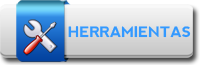
<style>
.page{position:relative;width:200px;height:65px}
.page>*{position:absolute;margin:0}
.t1{font:14.5px "nevis-Bold";color:#3399ff}
</style>
<div class="page">
<p class="t1" style="left:68px;top:26px;width:123px;height:12px">HERRAMIENTAS</p>
</div>
